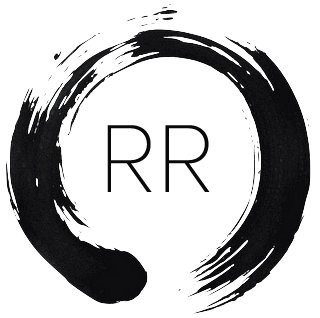
<style>
.page{position:relative;width:320px;height:318px;background:#ffffff}
.page>*{position:absolute;margin:0}
.t1{font:100px "ProximaNovaT-Thin";color:#09090a}
</style>
<div class="page">
<p class="t1" style="left:107px;top:125px;width:103px;height:67px">RR</p>
</div>
